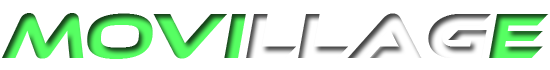
<style>
.page{position:relative;width:550px;height:70px;background:#ffffff}
.page>*{position:absolute;margin:0}
.t1{font:66px "EthnocentricRg-Italic"}
</style>
<div class="page">
<p class="t1" style="left:2px;top:13px;width:547px;height:46px">MOVIllage</p>
</div>
